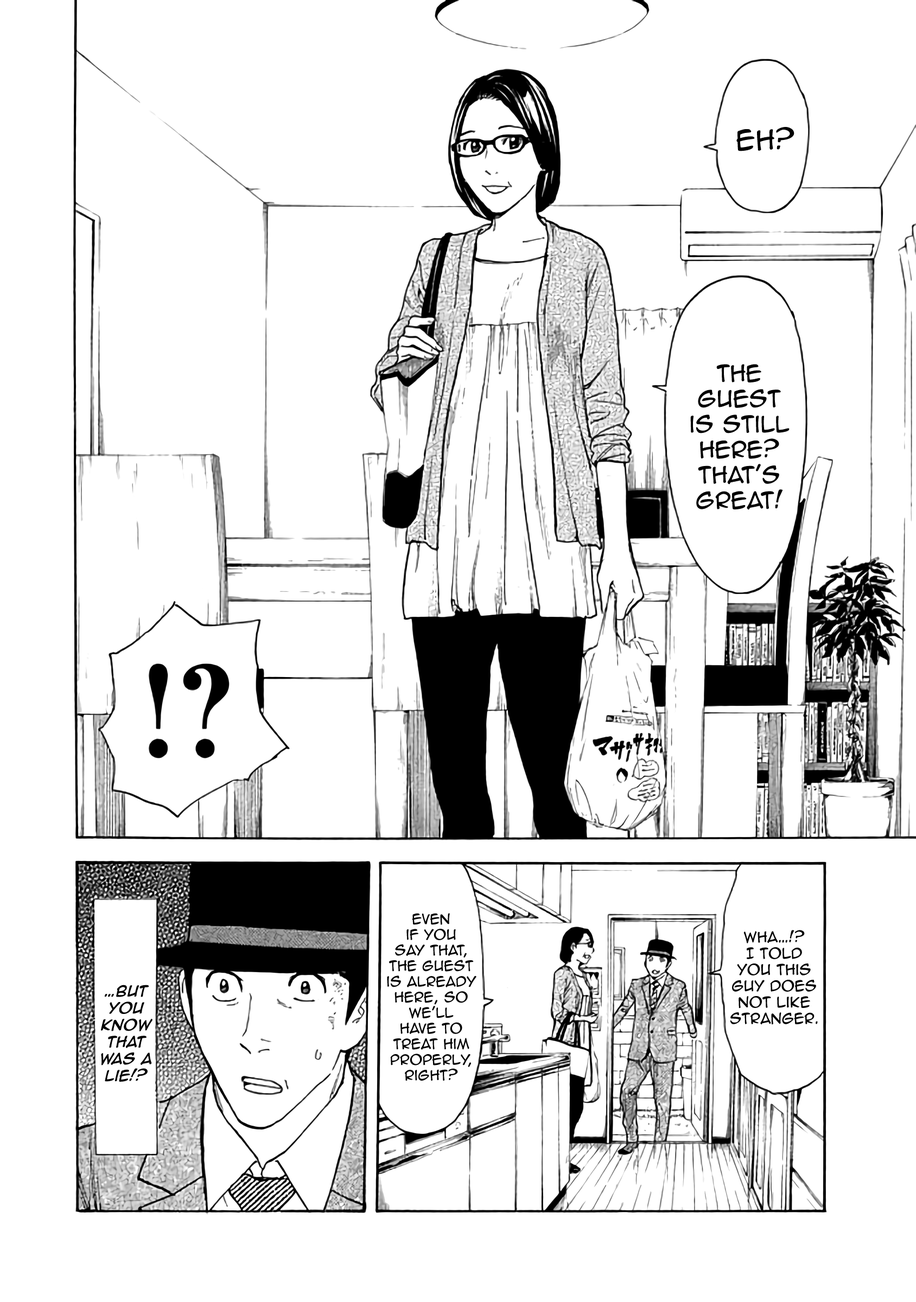
<style>
.page{position:relative;width:916px;height:1302px;background:#ffffff}
.page>*{position:absolute;margin:0}
.t1{font:25.5px "AnimeAce2.0BB";color:#000000}
.t2{font:21.2px "AnimeAce2.0BB";color:#000000}
.t3{font:13px "AnimeAce2.0BB";color:#000000}
.t4{font:13.6px "AnimeAce2.0BB";color:#000000}
.t5{font:14.1px "AnimeAce2.0BB-Italic";color:#000000;font-weight:bold}
</style>
<div class="page">
<p class="t1" style="left:736px;top:127px;width:58px;height:24px">Eh?</p>
<p class="t2" style="left:690px;top:364px;width:99px;height:146px;text-align:center">The <br>guest <br>is still <br>here? <br>That's <br>great!</p>
<p class="t3" style="left:387px;top:913px;width:89px;height:168px;text-align:center">Even <br>if you <br>say that, <br>the guest <br>is already here, so <br>we'll<br>have to<br>treat him<br>properly, right?</p>
<p class="t4" style="left:730px;top:930px;width:88px;height:95px;text-align:center">Wha…!? <br>I told <br>you this guy does not like <br>stranger.</p>
<p class="t5" style="left:101px;top:985px;width:51px;height:97px;text-align:center">…But <br>you <br>know <br>that <br>was a <br>lie!?</p>
</div>
